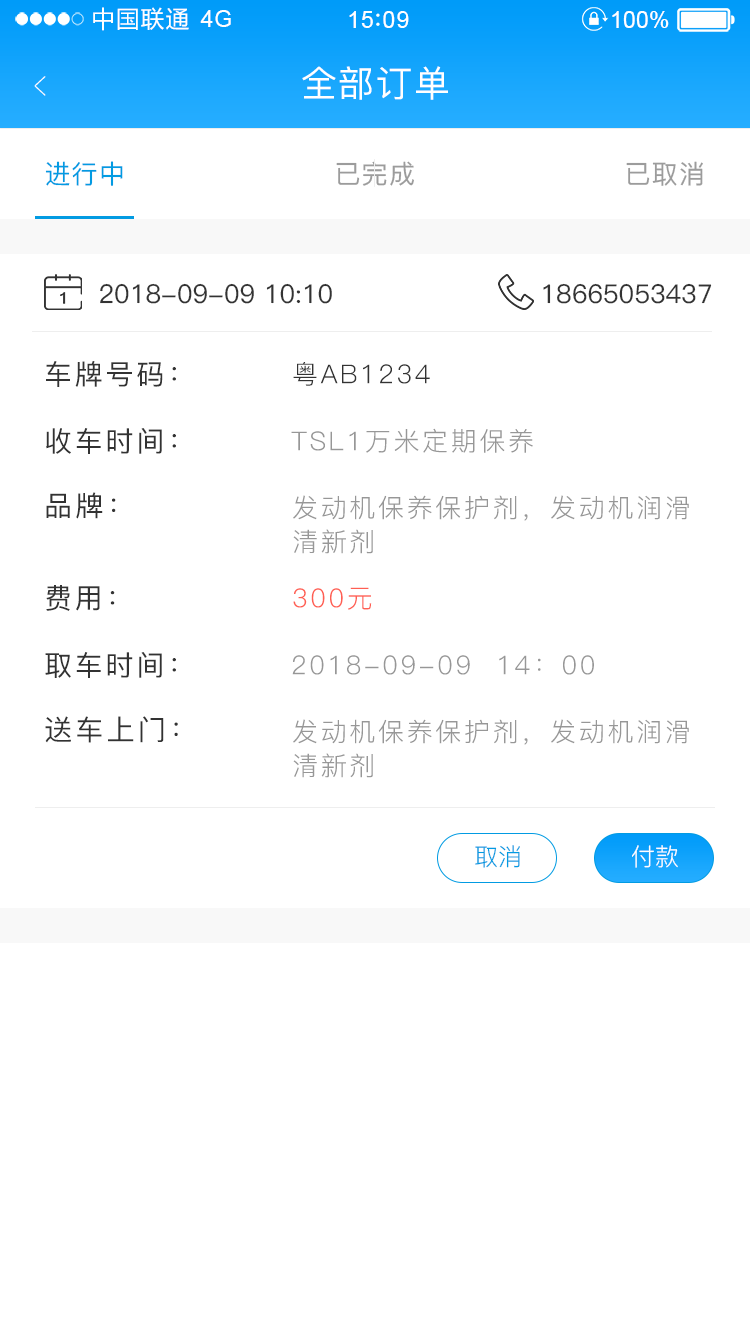
<style>
.page{position:relative;width:750px;height:1334px;background:#ffffff}
.page>*{position:absolute;margin:0}
.t1{font:23.4px "MicrosoftYaHei";letter-spacing:0.06em;color:#ffffff}
.t2{font:23.4px "ArialMT";letter-spacing:0.02em;color:#ffffff}
.t3{font:23.4px "ArialMT";letter-spacing:0.04em;color:#ffffff}
.t4{font:23.4px "ArialMT";color:#ffffff}
.t5{font:39px "PingFang-SC-ExtraLight";letter-spacing:0.1em;color:#ffffff;scale:0.51 1}
.t6{font:36px "PingFang-SC-Medium";letter-spacing:0.05em;color:#ffffff}
.t7{font:26.1px "PingFang-SC-Medium";letter-spacing:0.05em;color:#029be2}
.t8{font:26.1px "PingFang-SC-Medium";letter-spacing:0.05em;color:#9c9c9c}
.t9{font:26px "PingFang-SC-Medium";color:#333333}
.t10{font:28px "PingFang-SC-Medium";letter-spacing:0.1em;color:#333333}
.t11{font:26.1px "PingFang-SC-Regular";letter-spacing:0.1em;color:#333333}
.t12{font:28px "PingFang-SC-Medium";letter-spacing:0.1em;color:#323232}
.t13{font:26.1px "PingFang-SC-Regular";letter-spacing:0.1em;color:#979797}
.t14{font:25.7px/34px "PingFang-SC-Regular";letter-spacing:0.1em;color:#979797}
.t15{font:26.1px "PingFang-SC-Regular";letter-spacing:0.1em;color:#ff5f53}
.t16{font:24px "PingFang-SC-Regular";color:#029be2}
.t17{font:24px "PingFang-SC-Regular";color:#ffffff}
</style>
<div class="page">
<p class="t1" style="left:93px;top:7px;width:96px;height:24px">中国联通</p>
<p class="t2" style="left:200px;top:10px;width:31px;height:17px">4G</p>
<p class="t3" style="left:349px;top:11px;width:60px;height:17px">15 09</p>
<p class="t4" style="left:612px;top:11px;width:57px;height:17px">100%</p>
<p class="t5" style="left:34px;top:76px;width:12px;height:20px;rotate:180deg">&gt;</p>
<p class="t6" style="left:302px;top:66px;width:146px;height:34px">全部订单</p>
<p class="t7" style="left:45px;top:161px;width:78px;height:25px">进行中</p>
<p class="t8" style="left:336px;top:161px;width:78px;height:25px">已完成</p>
<p class="t8" style="left:626px;top:161px;width:77px;height:25px">已取消</p>
<p class="t9" style="left:100px;top:283px;width:232px;height:21px">2018-09-09 10:10</p>
<p class="t9" style="left:543px;top:283px;width:169px;height:21px">18665053437</p>
<p class="t10" style="left:46px;top:361px;width:130px;height:26px">车牌号码：</p>
<p class="t11" style="left:293px;top:362px;width:137px;height:24px">粤AB1234</p>
<p class="t12" style="left:46px;top:428px;width:130px;height:26px">收车时间：</p>
<p class="t13" style="left:291px;top:428px;width:242px;height:25px">TSL1万米定期保养</p>
<p class="t12" style="left:46px;top:492px;width:70px;height:27px">品牌：</p>
<p class="t14" style="left:293px;top:495px;width:396px;height:59px">发动机保养保护剂，发动机润滑<br>清新剂</p>
<p class="t10" style="left:46px;top:585px;width:69px;height:26px">费用：</p>
<p class="t15" style="left:293px;top:587px;width:79px;height:23px">300元</p>
<p class="t12" style="left:45px;top:652px;width:131px;height:26px">取车时间：</p>
<p class="t13" style="left:292px;top:655px;width:302px;height:20px">2018-09-09  14：00</p>
<p class="t12" style="left:45px;top:716px;width:133px;height:27px">送车上门：</p>
<p class="t14" style="left:293px;top:719px;width:396px;height:59px">发动机保养保护剂，发动机润滑<br>清新剂</p>
<p class="t16" style="left:475px;top:845px;width:45px;height:23px">取消</p>
<p class="t17" style="left:632px;top:845px;width:46px;height:23px">付款</p>
</div>
